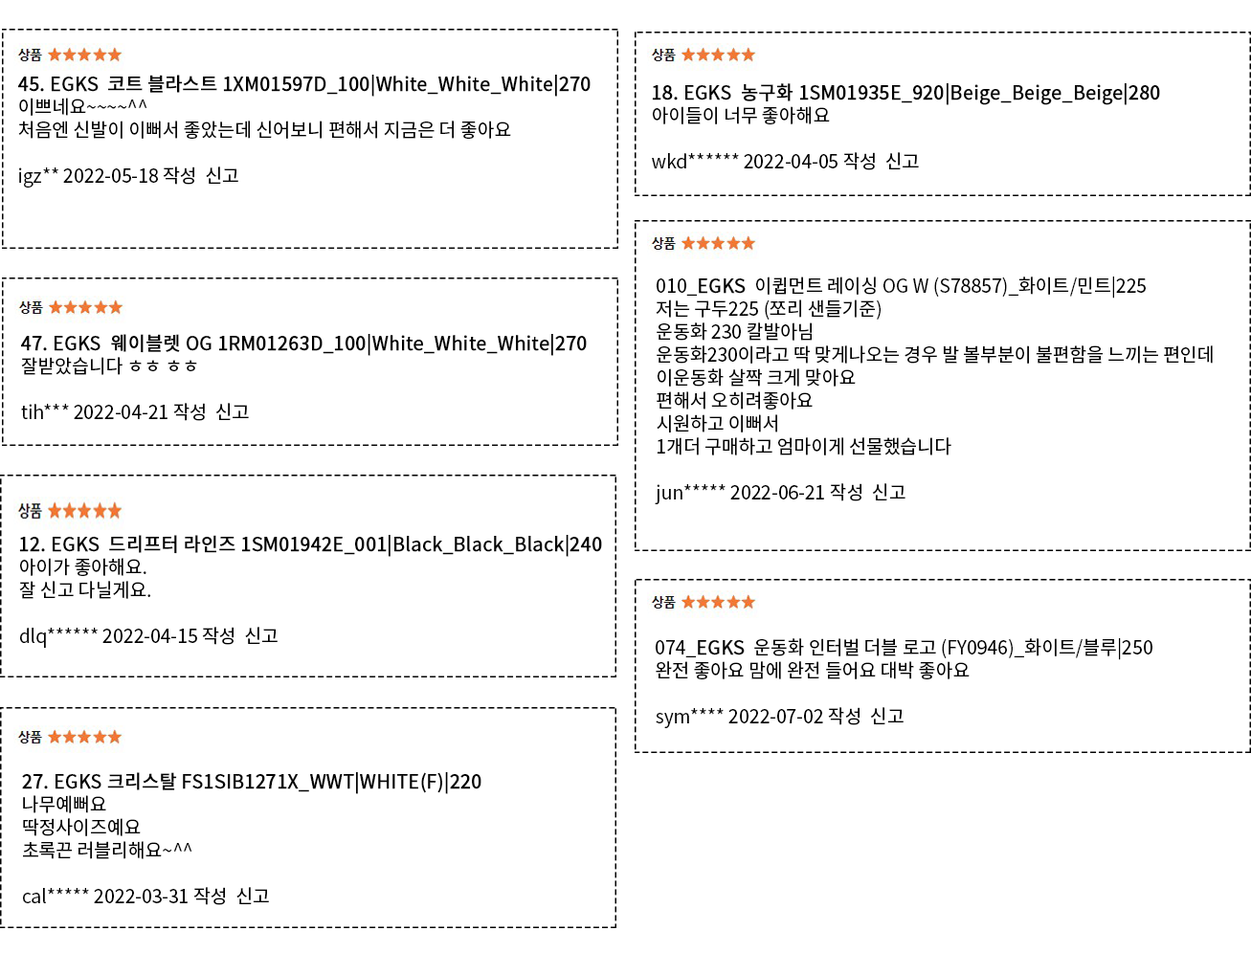
<style>
.page{position:relative;width:1251px;height:953px;background:#ffffff}
.page>*{position:absolute;margin:0}
.t1{font:19.1px "NotoSansKR-Regular";color:#000000;scale:0.97 1}
.t2{font:19.1px "NotoSansKR-Regular";color:#000000;font-weight:bold;scale:0.97 1}
</style>
<div class="page">
<p class="t1" style="left:18px;top:75px;width:573px;height:113px"><span class="t2">45. EGKS  코트 블라스트 1XM01597D_100|White_White_White|270<br></span>이쁘네요~~~~^^<br>처음엔 신발이 이뻐서 좋았는데 신어보니 편해서 지금은 더 좋아요 <br><br>igz** 2022-05-18 작성  신고</p>
<p class="t2" style="left:652px;top:83px;width:508px;height:87px">18. EGKS  농구화 1SM01935E_920|Beige_Beige_Beige|280<br><span class="t1">아이들이 너무 좋아해요<br><br>wkd****** 2022-04-05 작성  신고</span></p>
<p class="t1" style="left:655px;top:277px;width:558px;height:227px">010_<span class="t2">EGKS </span> 이큅먼트 레이싱 OG W (S78857)_화이트/민트|225<br>저는 구두225 (쪼리 샌들기준)<br>운동화 230 칼발아님<br>운동화230이라고 딱 맞게나오는 경우 발 볼부분이 불편함을 느끼는 편인데<br>이운동화 살짝 크게 맞아요<br>편해서 오히려좋아요<br>시원하고 이뻐서<br>1개더 구매하고 엄마이게 선물했습니다<br><br>jun***** 2022-06-21 작성  신고</p>
<p class="t2" style="left:21px;top:334px;width:566px;height:87px"><span class="t1"><br></span>47. EGKS  웨이블렛 OG 1RM01263D_100|White_White_White|270 <br><span class="t1">잘받았습니다 ㅎㅎ ㅎㅎ<br><br>tih*** 2022-04-21 작성  신고</span></p>
<p class="t2" style="left:19px;top:535px;width:583px;height:113px">12. EGKS  드리프터 라인즈 1SM01942E_001|Black_Black_Black|240<br><span class="t1">아이가 좋아해요.<br>잘 신고 다닐게요.<br><br>dlq****** 2022-04-15 작성  신고</span></p>
<p class="t1" style="left:656px;top:638px;width:496px;height:90px">074_<span class="t2">EGKS </span> 운동화 인터벌 더블 로고 (FY0946)_화이트/블루|250<br>완전 좋아요 맘에 완전 들어요 대박 좋아요 <br><br>sym**** 2022-07-02 작성  신고</p>
<p class="t1" style="left:22px;top:772px;width:459px;height:133px"><span class="t2">27. EGKS 크리스탈 FS1SIB1271X_WWT|WHITE(F)|220<br></span>나무예뻐요<br>딱정사이즈예요<br>초록끈 러블리해요~^^<br><br>cal***** 2022-03-31 작성  신고</p>
</div>
